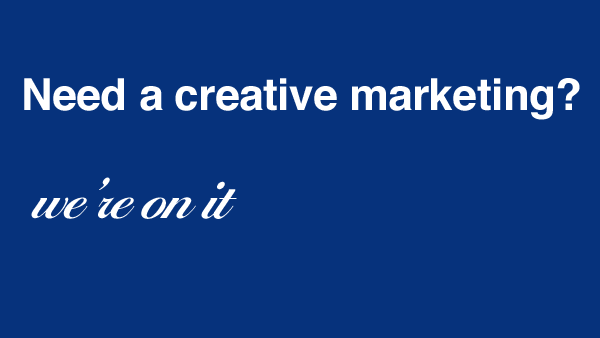
<style>
.page{position:relative;width:600px;height:338px;background:#06327c}
.page>*{position:absolute;margin:0}
.t1{font:44px "Helvetica-Bold";letter-spacing:-0.01em;color:#ffffff}
.t2{font:60px "BallantinesScrEFCE-DemBol";letter-spacing:-0.025em;color:#ffffff}
</style>
<div class="page">
<p class="t1" style="left:24px;top:78px;width:556px;height:42px">Need a creative marketing?</p>
<p class="t2" style="left:31px;top:177px;width:206px;height:42px">we’re on it</p>
</div>
